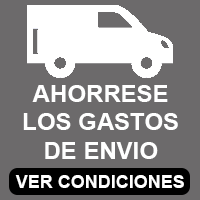
<style>
.page{position:relative;width:200px;height:200px;background:#6c6a6b}
.page>*{position:absolute;margin:0}
.t1{font:24px "Arial-BoldMT";color:#ffffff}
.t2{font:18px "Arial-BoldMT";color:#ffffff}
</style>
<div class="page">
<p class="t1" style="left:23px;top:85px;width:155px;height:74px;text-align:center">AHORRESE<br>LOS GASTOS<br>DE ENVIO</p>
<p class="t2" style="left:15px;top:175px;width:169px;height:13px">VER CONDICIONES</p>
</div>
